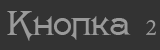
<style>
.page{position:relative;width:160px;height:50px;background:#333333}
.page>*{position:absolute;margin:0}
.t1{font:24px "Washington";color:#9a9a9a}
.t2{font:24px "MinionPro-Regular";color:#9a9a9a}
</style>
<div class="page">
<p class="t1" style="left:7px;top:11px;width:149px;height:30px">Кнопка <span class="t2">2</span></p>
</div>
